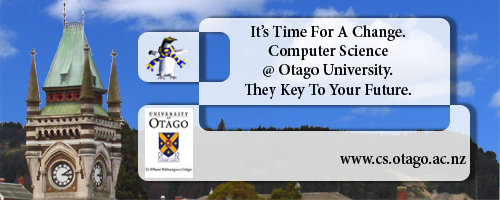
<style>
.page{position:relative;width:500px;height:200px}
.page>*{position:absolute;margin:0}
.t1{font:16px "MinionPro-Semibold";color:#000000}
</style>
<div class="page">
<p class="t1" style="left:244px;top:25px;width:167px;height:74px;text-align:center">It’s Time For A Change.<br>Computer Science<br>@ Otago University.<br>They Key To Your Future.</p>
<p class="t1" style="left:340px;top:153px;width:126px;height:15px">www.cs.otago.ac.nz</p>
</div>
